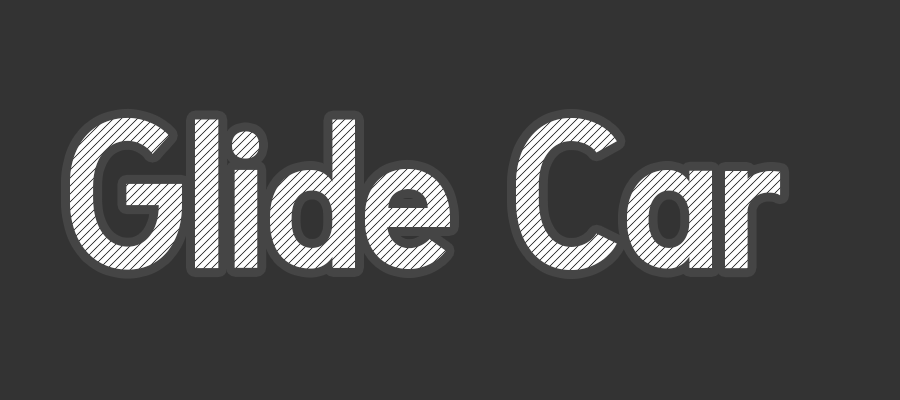
<style>
.page{position:relative;width:900px;height:400px;background:#333333}
.page>*{position:absolute;margin:0}
.t1{font:200px "PlutoniumSans-Regular";color:#ffffff}
</style>
<div class="page">
<p class="t1" style="left:70px;top:117px;width:711px;height:153px">Glide Car</p>
</div>
